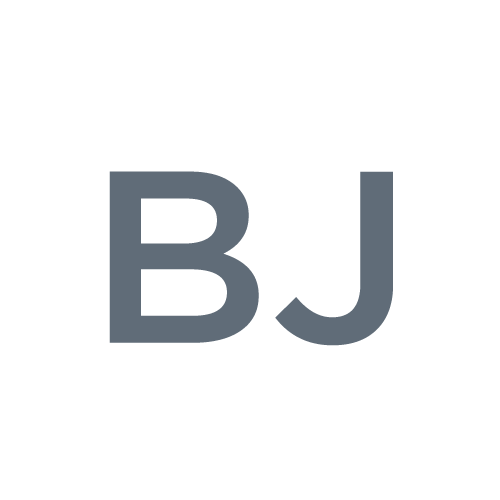
<style>
.page{position:relative;width:500px;height:500px;background:#ffffff}
.page>*{position:absolute;margin:0}
.t1{font:244.1px "iCielGotham-Medium";color:#606c78;scale:1.05 1}
</style>
<div class="page">
<p class="t1" style="left:109px;top:171px;width:284px;height:175px">BJ</p>
</div>
